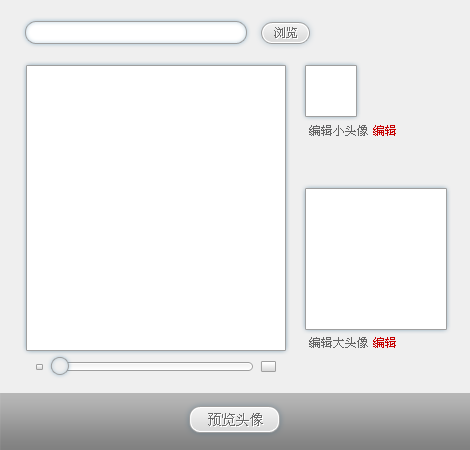
<style>
.page{position:relative;width:470px;height:450px;background:#ffffff}
.page>*{position:absolute;margin:0}
.t1{font:12px "SimSun";color:#6a6a6a}
.t2{font:12px "SimSun";color:#636363}
.t3{font:12px "SimSun";color:#c70000}
.t4{font:14px "SimSun";color:#6a6a6a}
</style>
<div class="page">
<p class="t1" style="left:274px;top:27px;width:23px;height:11px">浏览</p>
<p class="t2" style="left:309px;top:125px;width:59px;height:11px">编辑小头像</p>
<p class="t3" style="left:373px;top:125px;width:23px;height:11px">编辑</p>
<p class="t2" style="left:309px;top:337px;width:59px;height:11px">编辑大头像</p>
<p class="t3" style="left:373px;top:337px;width:23px;height:11px">编辑</p>
<p class="t4" style="left:208px;top:413px;width:55px;height:13px">预览头像</p>
</div>
